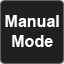
<style>
.page{position:relative;width:64px;height:64px;background:#202020}
.page>*{position:absolute;margin:0}
.t1{font:16px "Arial-BoldMT";color:#ffffff}
</style>
<div class="page">
<p class="t1" style="left:5px;top:15px;width:54px;height:12px">Manual</p>
<p class="t1" style="left:12px;top:35px;width:41px;height:12px">Mode</p>
</div>
